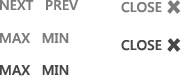
<style>
.page{position:relative;width:184px;height:80px;background:#ffffff}
.page>*{position:absolute;margin:0}
.t1{font:14px "SegoeUI-SemiBold";color:#7b7b7b}
.t2{font:17px "LithosPro-Black";color:#7b7b7b}
.t3{font:14px "SegoeUI-SemiBold";color:#474747}
.t4{font:17px "LithosPro-Black";color:#474747}
</style>
<div class="page">
<p class="t1" style="left:0px;top:0px;width:78px;height:10px">NEXT   PREV</p>
<p class="t1" style="left:121px;top:2px;width:41px;height:11px">CLOSE</p>
<p class="t2" style="left:167px;top:0px;width:14px;height:14px">X</p>
<p class="t1" style="left:0px;top:33px;width:69px;height:11px">MAX   MIN</p>
<p class="t3" style="left:121px;top:40px;width:41px;height:11px">CLOSE</p>
<p class="t4" style="left:167px;top:38px;width:14px;height:14px">X</p>
<p class="t3" style="left:0px;top:65px;width:69px;height:11px">MAX   MIN</p>
</div>
